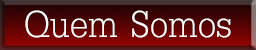
<style>
.page{position:relative;width:256px;height:50px}
.page>*{position:absolute;margin:0}
.t1{font:56.3px "DilleniaUPC";color:#ffffff}
</style>
<div class="page">
<p class="t1" style="left:25px;top:10px;width:206px;height:28px">Quem Somos</p>
</div>
